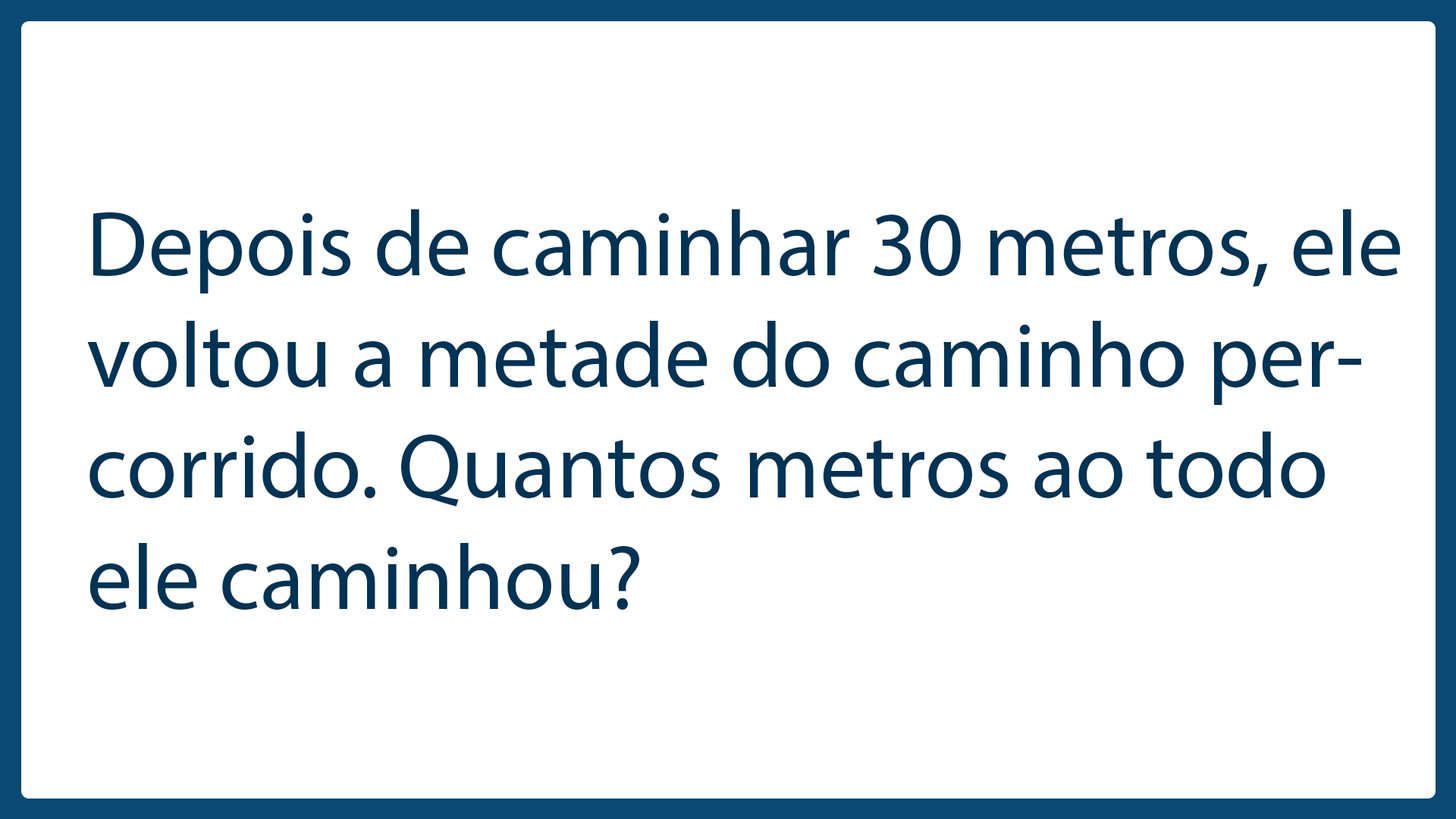
<style>
.page{position:relative;width:1456px;height:819px;background:#ffffff}
.page>*{position:absolute;margin:0}
.t1{font:92.6px "MyriadPro-Regular";color:#003355}
</style>
<div class="page">
<p class="t1" style="left:87px;top:209px;width:1314px;height:401px">Depois de caminhar 30 metros, ele voltou a metade do caminho percorrido. Quantos metros ao todo ele caminhou?</p>
</div>
